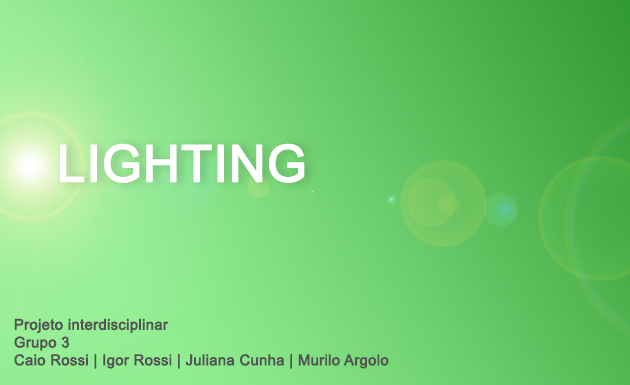
<style>
.page{position:relative;width:630px;height:385px}
.page>*{position:absolute;margin:0}
.t1{font:50.7px "ArialMT";color:#ffffff;font-weight:bold}
.t2{font:14.8px "ArialMT";color:#535353;font-weight:bold}
</style>
<div class="page">
<p class="t1" style="left:60px;top:143px;width:245px;height:40px">LIGHTING</p>
<p class="t2" style="left:14px;top:318px;width:375px;height:51px">Projeto interdisciplinar<br>Grupo 3<br>Caio Rossi | Igor Rossi | Juliana Cunha | Murilo Argolo</p>
</div>
